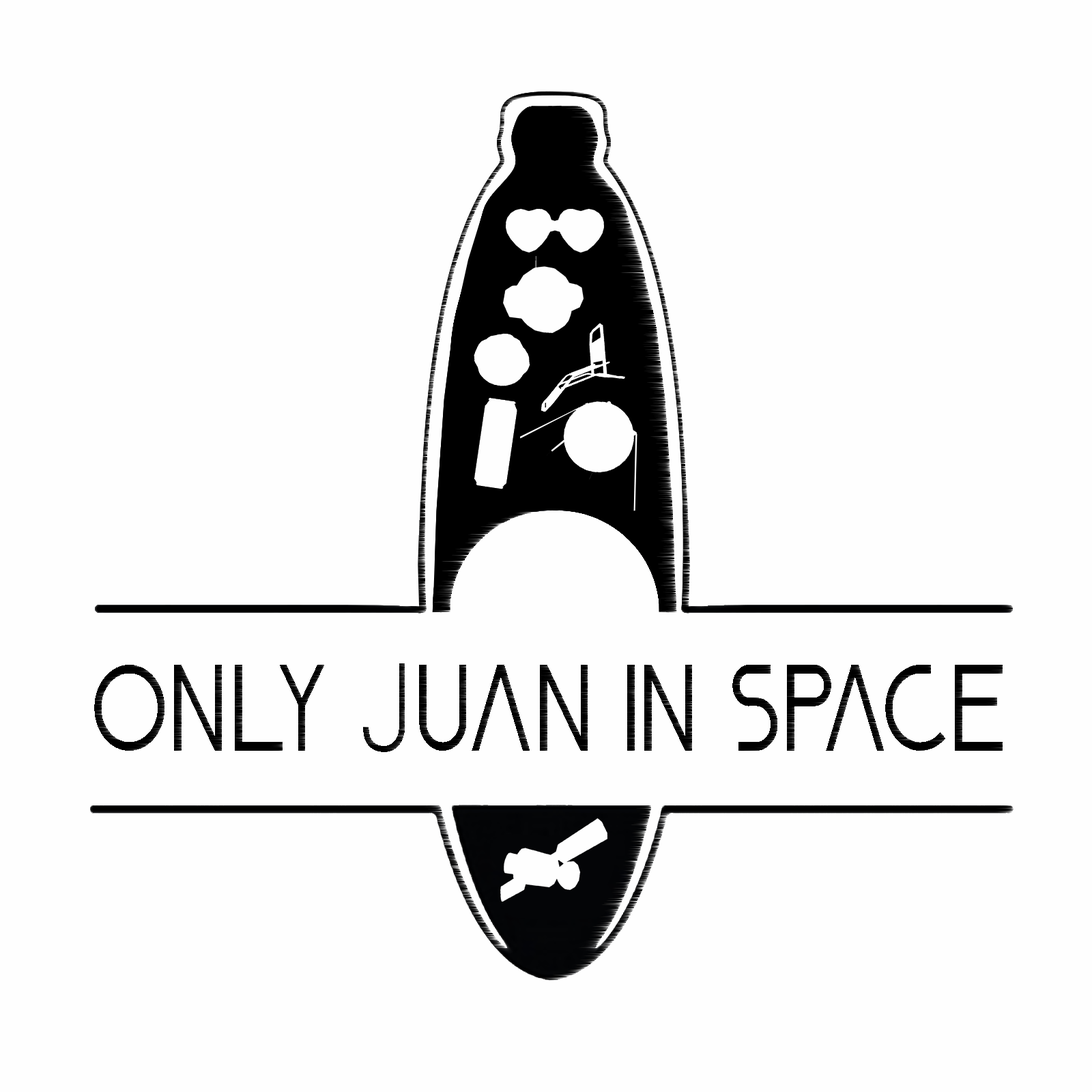
<style>
.page{position:relative;width:1092px;height:1092px;background:#fefefe}
.page>*{position:absolute;margin:0}
.t1{font:123.1px "Nasa21";color:#000000;scale:0.81 1}
.t2{font:123.1px "Roboto-Light";color:#000000;scale:0.81 1}
</style>
<div class="page">
<p class="t1" style="left:94px;top:663px;width:909px;height:89px;opacity:0.64">ONLY <span class="t2">J</span>UAN IN SPACE</p>
</div>
